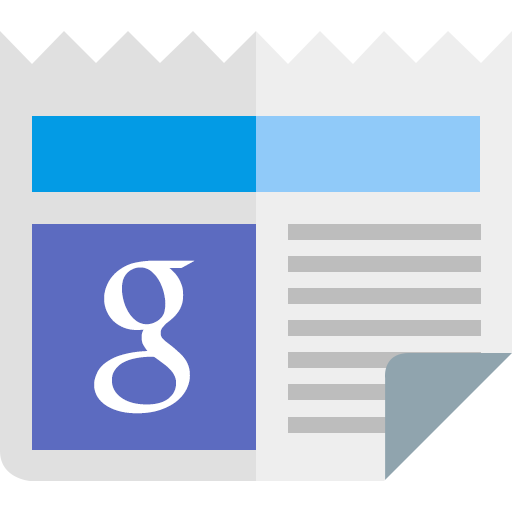
<style>
.page{position:relative;width:512px;height:512px;background:#eeeeee}
.page>*{position:absolute;margin:0}
.t1{font:200px "Catull-Regular";letter-spacing:-0.04em;color:#ffffff}
</style>
<div class="page">
<p class="t1" style="left:94px;top:260px;width:101px;height:154px">g</p>
</div>
